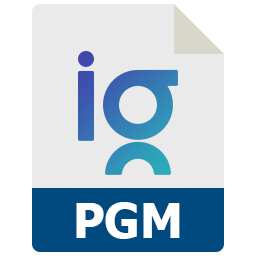
<style>
.page{position:relative;width:256px;height:256px;background:#eaeaea}
.page>*{position:absolute;margin:0}
.t1{font:48px "Tahoma-Bold";color:#ffffff}
</style>
<div class="page">
<p class="t1" style="left:76px;top:202px;width:104px;height:37px">PGM</p>
</div>
